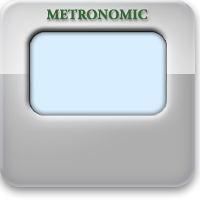
<style>
.page{position:relative;width:200px;height:200px;background:#d9efff}
.page>*{position:absolute;margin:0}
.t1{font:14px "AGaramondPro-Bold";color:#336633;text-transform:uppercase}
</style>
<div class="page">
<p class="t1" style="left:46px;top:9px;width:102px;height:11px">Metronomic</p>
</div>
